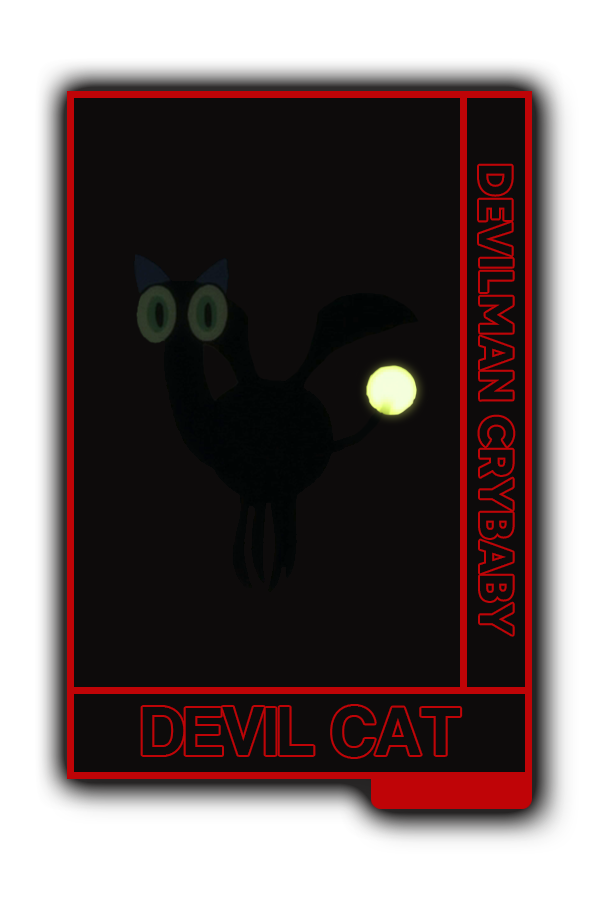
<style>
.page{position:relative;width:600px;height:900px;background:#0d0b0b}
.page>*{position:absolute;margin:0}
.t1{font:46.8px "MADETOMMY-Bold";color:#0d0b0b}
.t2{font:71.5px "CoolveticaRg-Regular";color:#0d0b0b}
</style>
<div class="page">
<p class="t1" style="left:479px;top:165px;width:35px;height:470px;rotate:90deg">DEVILMAN CRYBABY</p>
<p class="t2" style="left:142px;top:706px;width:319px;height:51px">DEVIL CAT</p>
</div>
